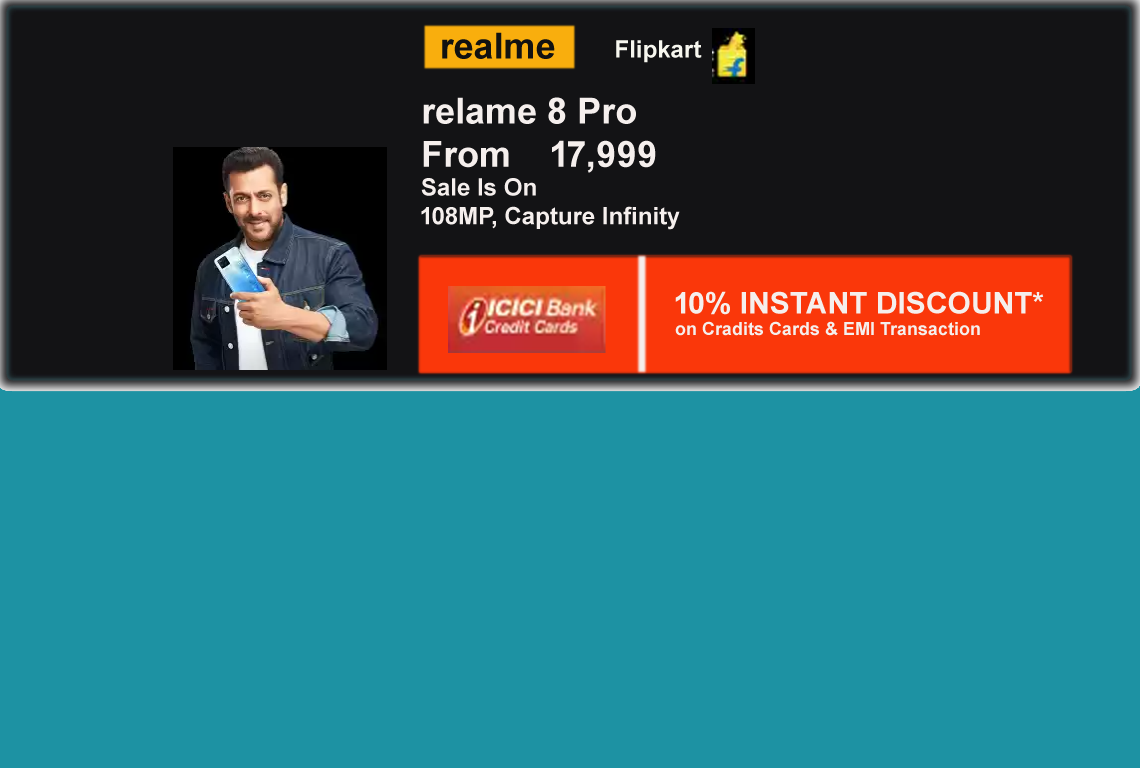
<style>
.page{position:relative;width:1140px;height:768px;background:#1d92a3}
.page>*{position:absolute;margin:0}
.t1{font:36px "Arial-BoldMT";color:#121211}
.t2{font:24px "Arial-BoldMT";color:#f7f7ef}
.t3{font:24px "Arial-BoldMT";color:#f5efed}
.t4{font:36px "Arial-BoldMT";color:#f5efed}
.t5{font:18px "Arial-BoldMT";color:#f5efed}
.t6{font:30px "Arial-BoldMT";color:#f5efed}
</style>
<div class="page">
<p class="t1" style="left:442px;top:32px;width:113px;height:27px">realme</p>
<p class="t2" style="left:616px;top:40px;width:86px;height:23px">Flipkart</p>
<p class="t3" style="left:421px;top:97px;width:259px;height:133px"><span class="t4">relame 8 Pro<br>From    17,999<br></span>Sale Is On<br>108MP, Capture Infinity</p>
<p class="t5" style="left:675px;top:291px;width:369px;height:45px"><span class="t6">10% INSTANT DISCOUNT*<br></span>on Cradits Cards &amp; EMI Transaction</p>
</div>
